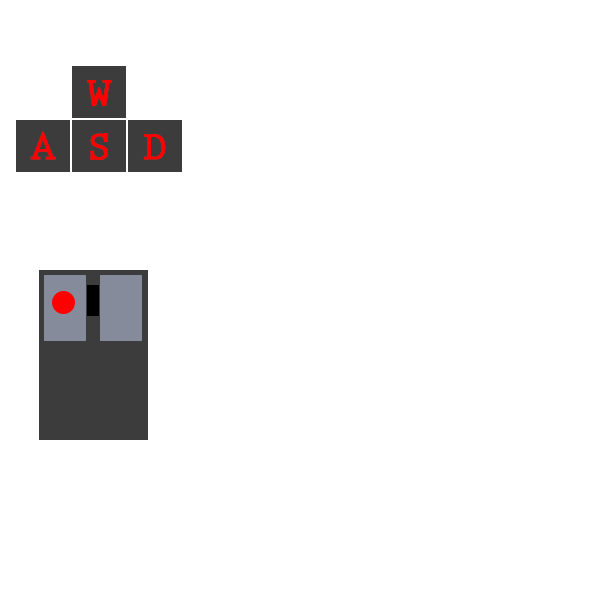
<style>
.page{position:relative;width:591px;height:591px;background:#ffffff}
.page>*{position:absolute;margin:0}
.t1{font:41.7px "PrestigeEliteStd-Bd";color:#ff0000;font-weight:bold}
</style>
<div class="page">
<p class="t1" style="left:87px;top:80px;width:25px;height:26px">W</p>
<p class="t1" style="left:30px;top:131px;width:26px;height:29px">A</p>
<p class="t1" style="left:90px;top:133px;width:18px;height:27px">S</p>
<p class="t1" style="left:143px;top:134px;width:23px;height:26px">D</p>
</div>
